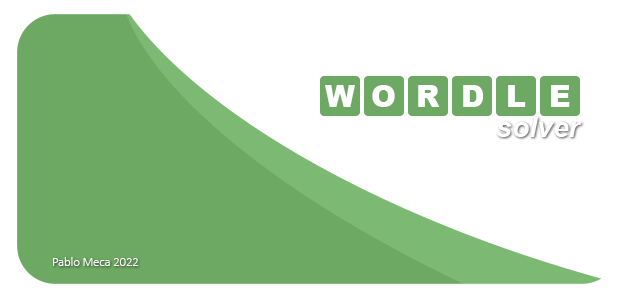
<style>
.page{position:relative;width:640px;height:300px;background:#ffffff}
.page>*{position:absolute;margin:0}
.t1{font:29.9px "Arial-Black";color:#ffffff}
.t2{font:12.5px "Calibri-Light";color:#ffffff}
</style>
<div class="page">
<p class="t1" style="left:325px;top:85px;width:30px;height:22px">W</p>
<p class="t1" style="left:372px;top:85px;width:23px;height:22px">O</p>
<p class="t1" style="left:418px;top:85px;width:22px;height:22px">R</p>
<p class="t1" style="left:463px;top:85px;width:20px;height:22px">D</p>
<p class="t1" style="left:508px;top:85px;width:18px;height:22px">L</p>
<p class="t1" style="left:551px;top:85px;width:19px;height:22px">E</p>
<p class="t2" style="left:53px;top:257px;width:86px;height:9px">Pablo Meca 2022</p>
</div>
